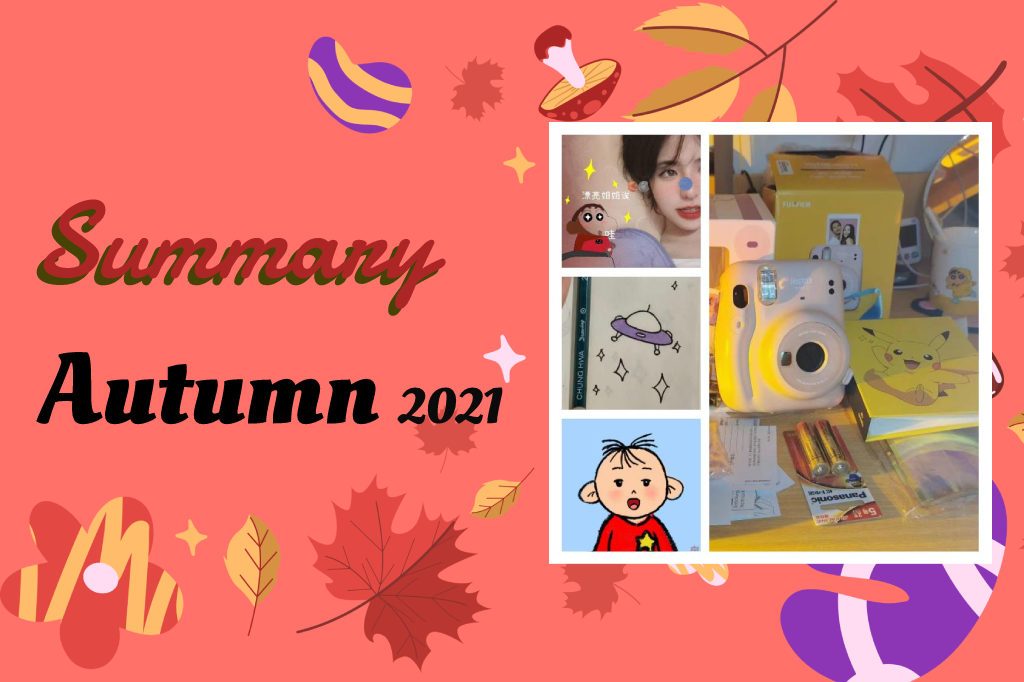
<style>
.page{position:relative;width:1024px;height:682px;background:#ff7169}
.page>*{position:absolute;margin:0}
.t1{font:110.1px "Damion"}
.t2{font:110.1px "Damion";color:#ad2626}
.t3{font:100px "OleoScript-Bold";color:#000000}
.t4{font:50px "OleoScript-Bold";color:#0c0b0b}
</style>
<div class="page">
<p class="t1" style="left:36px;top:206px;width:403px;height:110px">Summary</p>
<p class="t2" style="left:43px;top:199px;width:403px;height:110px">Summary</p>
<p class="t3" style="left:36px;top:352px;width:467px;height:73px">Autumn <span class="t4">2021</span></p>
</div>
